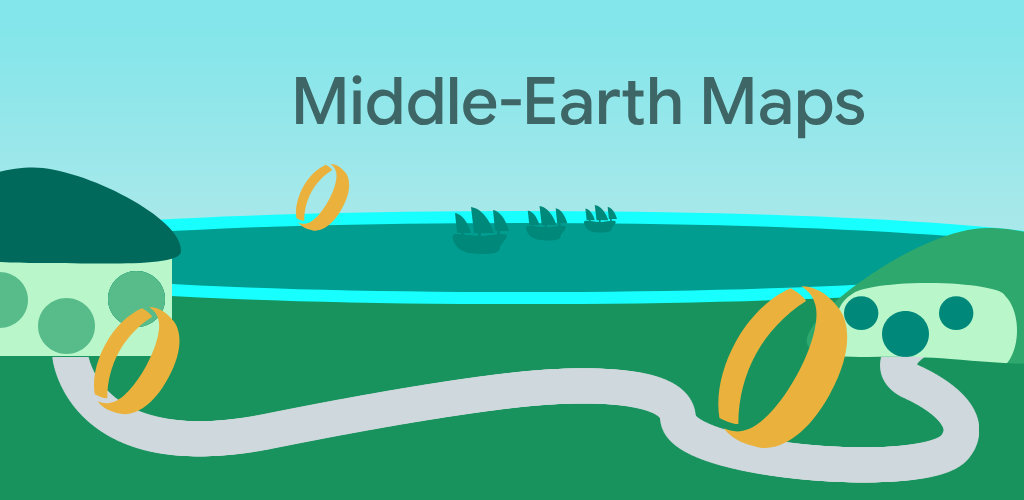
<style>
.page{position:relative;width:1024px;height:500px;background:#18935e}
.page>*{position:absolute;margin:0}
.t1{font:65.6px "GoogleSansFlex-Medium";color:#3e6666}
</style>
<div class="page">
<p class="t1" style="left:296px;top:75px;width:569px;height:64px">Middle-Earth Maps</p>
</div>
